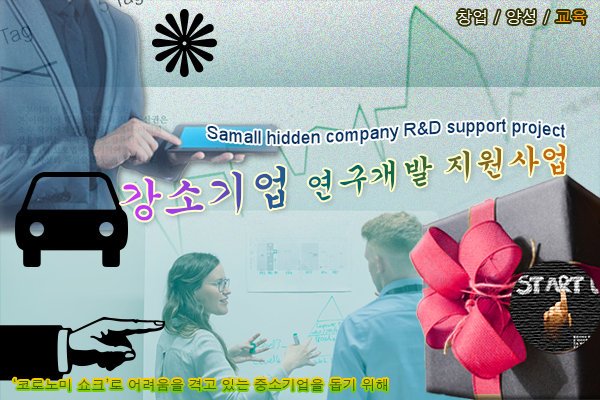
<style>
.page{position:relative;width:600px;height:400px}
.page>*{position:absolute;margin:0}
.t1{font:16px "Dotum";color:#ffffff}
.t2{font:16px "Dotum";color:#ff9900}
.t3{font:18px "ArialMT";color:#003366}
.t4{font:32px "Gungsuh"}
.t5{font:44px "Gungsuh"}
.t6{font:14px "Dotum";color:#336600}
</style>
<div class="page">
<p class="t1" style="left:457px;top:10px;width:129px;height:15px">창업 / 양성 / <span class="t2">교육</span></p>
<p class="t3" style="left:207px;top:118px;width:358px;height:27px">Samall hidden company R&amp;D support project</p>
<p class="t4" style="left:120px;top:144px;width:446px;height:77px"><span class="t5">강소기업</span> 연구개발 지원사업</p>
<p class="t6" style="left:13px;top:378px;width:375px;height:14px">‘코로노미 쇼크’로 어려움을 격고 있는 중소기업을 돕기 위해</p>
</div>
